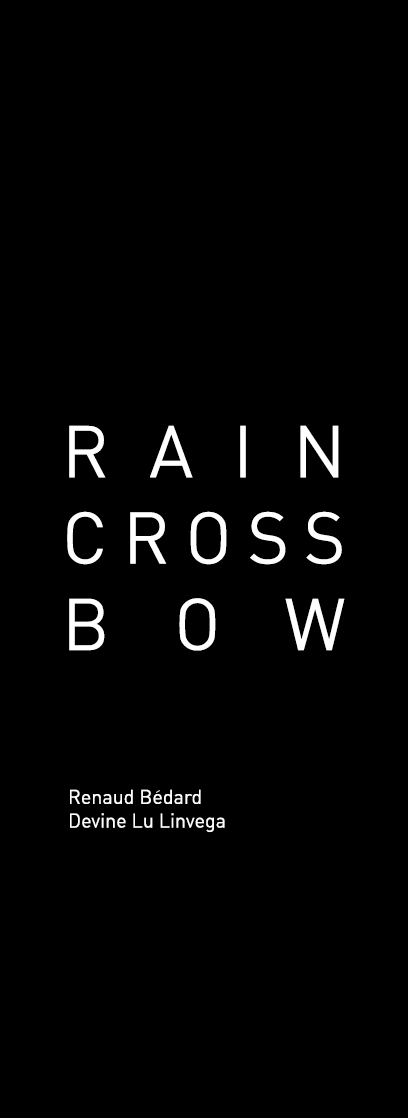
<style>
.page{position:relative;width:408px;height:1118px;background:#000000}
.page>*{position:absolute;margin:0}
.t1{font:72px "DIN-Regular";color:#ffffff}
.t2{font:19.7px "DIN-Regular";color:#ffffff}
</style>
<div class="page">
<p class="t1" style="left:67px;top:425px;width:278px;height:226px;text-align:justify">RAIN<br>CROSS<br>BOW</p>
<p class="t2" style="left:70px;top:789px;width:155px;height:44px;text-align:justify">Renaud Bedard<br>Devine Lu Linvega</p>
</div>
